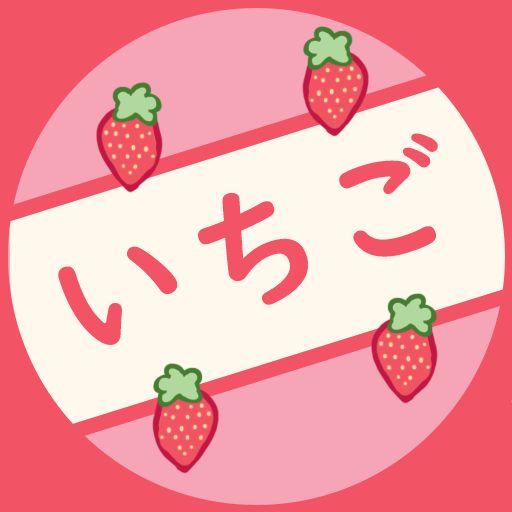
<style>
.page{position:relative;width:512px;height:512px;background:#fff9ed}
.page>*{position:absolute;margin:0}
.t1{font:140.4px "UDDigiKyokashoN-B";color:#f25365}
</style>
<div class="page">
<p class="t1" style="left:58px;top:133px;width:380px;height:212px;rotate:-17deg">いちご</p>
</div>
